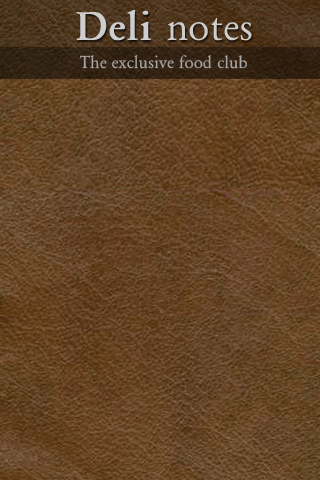
<style>
.page{position:relative;width:320px;height:480px}
.page>*{position:absolute;margin:0}
.t1{font:42px "Garamond";color:#cdcdcd}
.t2{font:42px "Garamond-Bold";color:#cdcdcd}
.t3{font:18px "Garamond";color:#a7a7a7}
</style>
<div class="page">
<p class="t1" style="left:76px;top:10px;width:176px;height:31px"><span class="t2">Deli </span>notes</p>
<p class="t3" style="left:79px;top:55px;width:168px;height:14px">The exclusive food club</p>
</div>
